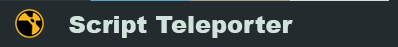
<style>
.page{position:relative;width:398px;height:47px;background:#242b2e}
.page>*{position:absolute;margin:0}
.t1{font:24px "Arial-Black";color:#d1e1db}
</style>
<div class="page">
<p class="t1" style="left:69px;top:16px;width:224px;height:22px">Script Teleporter</p>
</div>
